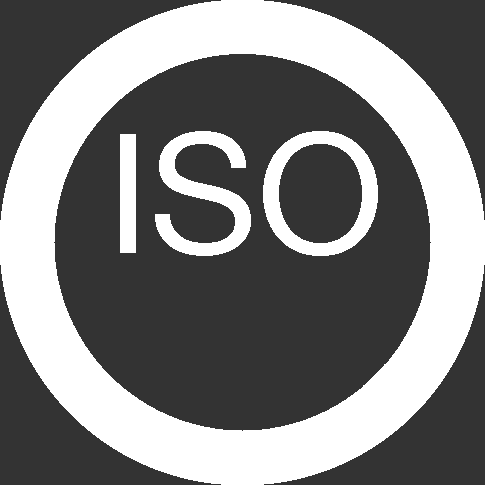
<style>
.page{position:relative;width:485px;height:485px;background:#333333}
.page>*{position:absolute;margin:0}
.t1{font:167.3px "HelveticaNeue";color:#ffffff}
</style>
<div class="page">
<p class="t1" style="left:120px;top:131px;width:258px;height:125px">ISO</p>
</div>
